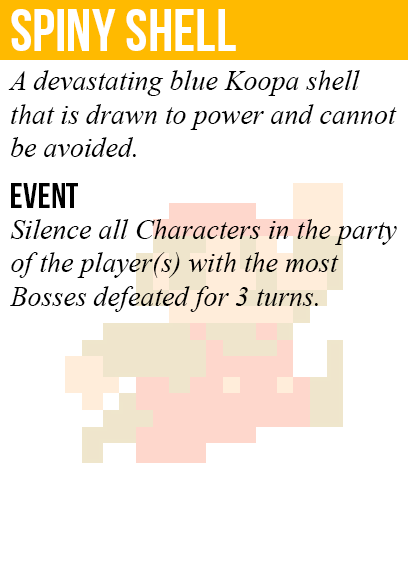
<style>
.page{position:relative;width:408px;height:585px;background:#ffffff}
.page>*{position:absolute;margin:0}
.t1{font:60px "BebasNeue";color:#ffffff}
.t2{font:28px "TimesNewRomanPS-ItalicMT";color:#000000}
.t3{font:36px "BebasNeue";color:#000000}
</style>
<div class="page">
<p class="t1" style="left:11px;top:9px;width:225px;height:42px">spiny shell</p>
<p class="t2" style="left:8px;top:70px;width:389px;height:87px">A devastating blue Koopa shell<br>that is drawn to power and cannot<br>be avoided.</p>
<p class="t3" style="left:11px;top:183px;width:67px;height:25px">event</p>
<p class="t2" style="left:10px;top:219px;width:387px;height:93px">Silence all Characters in the party<br>of the player(s) with the most<br>Bosses defeated for 3 turns.</p>
</div>
